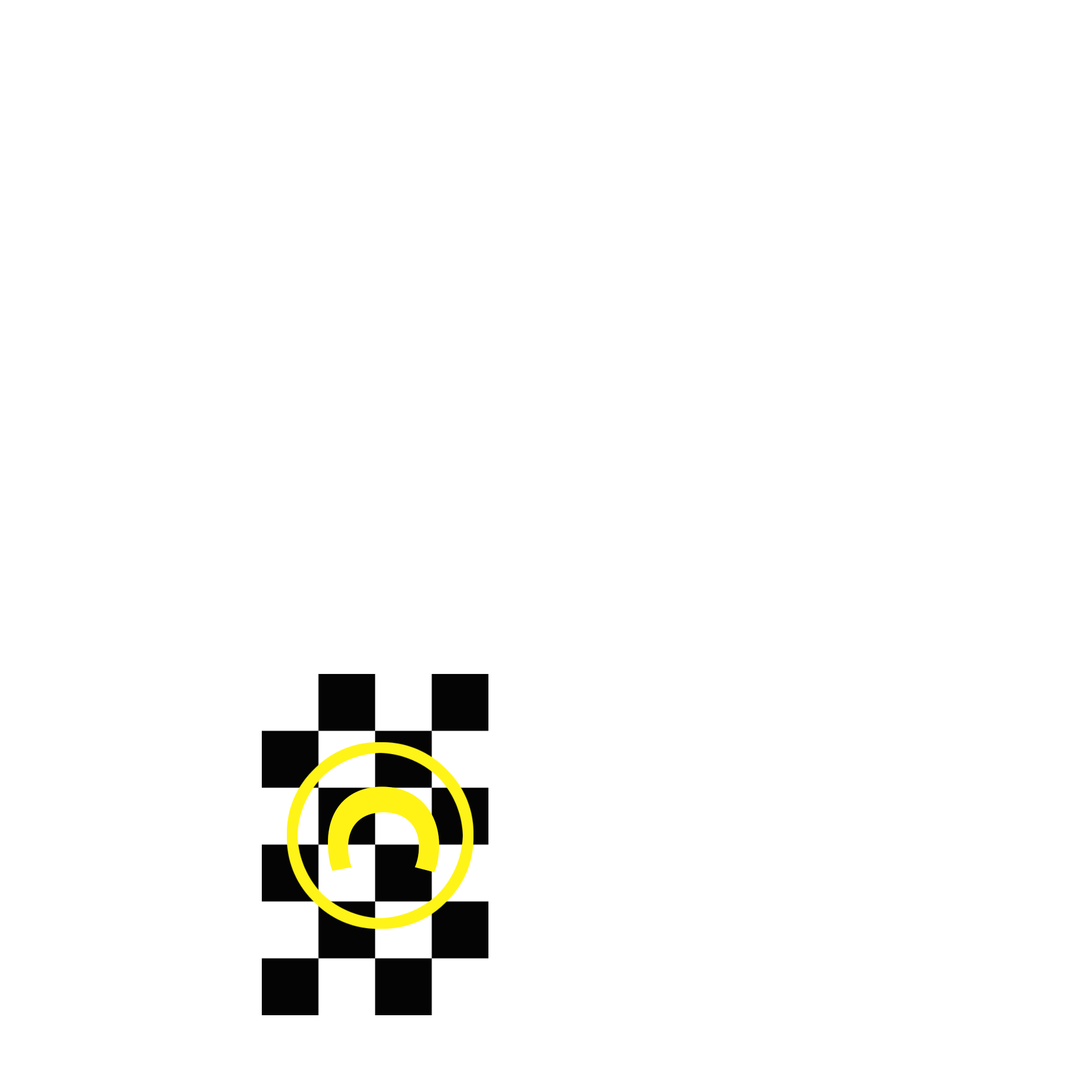
<style>
.page{position:relative;width:1092px;height:1092px;background:#ffffff}
.page>*{position:absolute;margin:0}
.t1{font:160px "MyriadPro-Bold";color:#fff316}
</style>
<div class="page">
<p class="t1" style="left:328px;top:786px;width:111px;height:86px;rotate:90deg">C</p>
</div>
